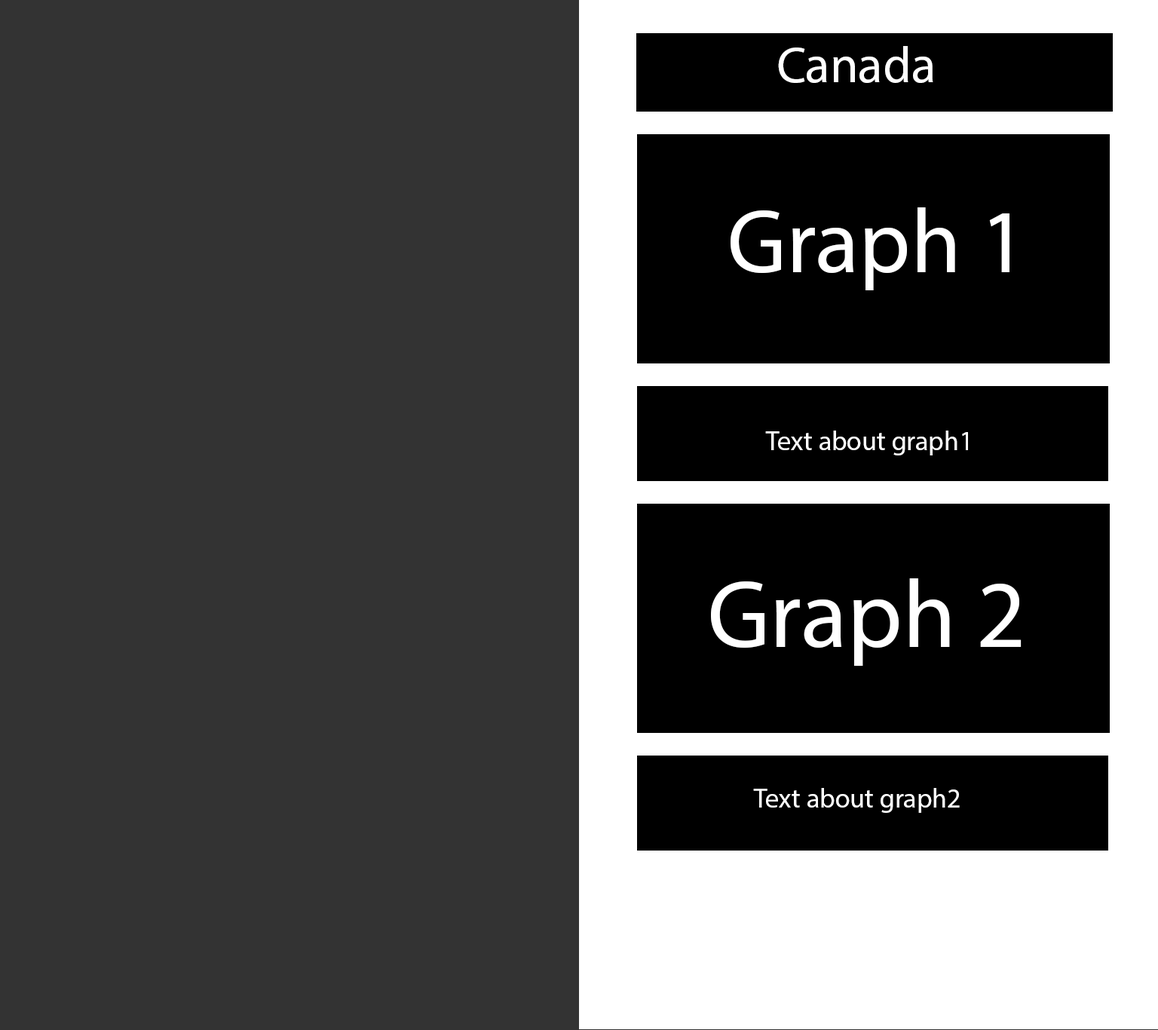
<style>
.page{position:relative;width:1158px;height:1030px;background:#333333}
.page>*{position:absolute;margin:0}
.t1{font:50.8px "MyriadPro-Regular";color:#ffffff}
.t2{font:90.8px "MyriadPro-Regular";color:#ffffff}
.t3{font:27.1px "MyriadPro-Regular";color:#ffffff}
.t4{font:96.7px "MyriadPro-Regular";color:#ffffff}
</style>
<div class="page">
<p class="t1" style="left:778px;top:46px;width:155px;height:37px">Canada</p>
<p class="t2" style="left:730px;top:207px;width:279px;height:83px">Graph 1</p>
<p class="t3" style="left:765px;top:430px;width:203px;height:25px">Text about graph1</p>
<p class="t4" style="left:711px;top:578px;width:310px;height:88px">Graph 2</p>
<p class="t3" style="left:753px;top:788px;width:207px;height:25px">Text about graph2</p>
</div>
